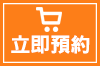
<style>
.page{position:relative;width:100px;height:66px;background:#fd7e18}
.page>*{position:absolute;margin:0}
.t1{font:20px "DFNHei-W9-WINP-BF";color:#ffffff}
</style>
<div class="page">
<p class="t1" style="left:11px;top:35px;width:79px;height:19px">立即預約</p>
</div>
